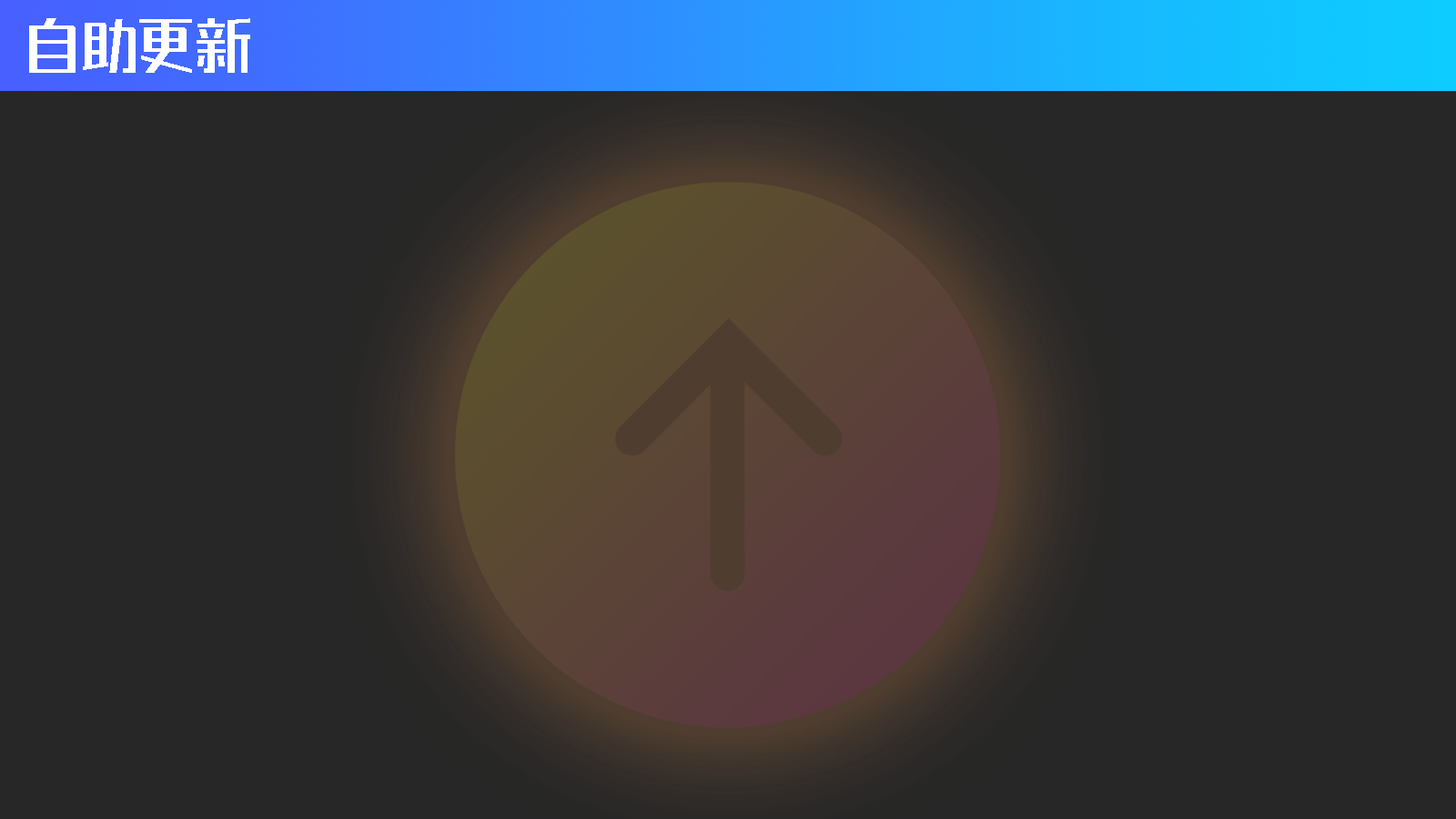
<style>
.page{position:relative;width:1456px;height:819px;background:#272727}
.page>*{position:absolute;margin:0}
.t1{font:56.9px "REEJIZhenyanGB20GX-Medium";color:#ffffff}
</style>
<div class="page">
<p class="t1" style="left:29px;top:18px;width:221px;height:55px">自助更新</p>
</div>
